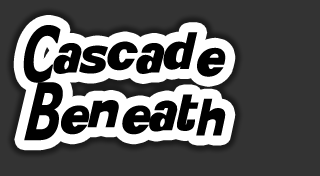
<style>
.page{position:relative;width:320px;height:176px;background:#333333}
.page>*{position:absolute;margin:0}
.t1{font:48px "KittyKatt";color:#000000}
</style>
<div class="page">
<p class="t1" style="left:23px;top:25px;width:203px;height:116px">Cascade Beneath</p>
</div>
